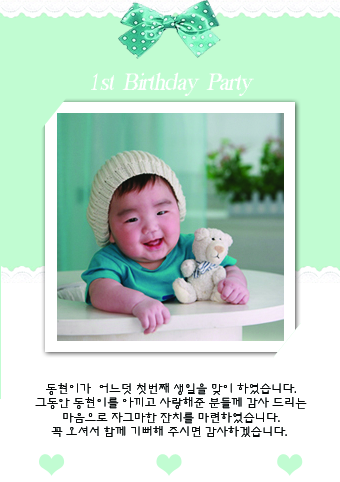
<style>
.page{position:relative;width:340px;height:482px;background:#ffffff}
.page>*{position:absolute;margin:0}
.t1{font:24px "MS Serif";letter-spacing:-0.05em;color:#ffffff;font-style:italic}
.t2{font:12px "HYnamL";letter-spacing:-0.05em;color:#060808}
</style>
<div class="page">
<p class="t1" style="left:91px;top:72px;width:163px;height:24px">1st  Birthday  Party</p>
<p class="t2" style="left:35px;top:383px;width:272px;height:54px;text-align:center">동현이가  어느덧 첫번째 생일을 맞이 하였습니다.<br>그동안 동현이를 아끼고 사랑해준 분들께 감사 드리는<br>마음으로 자그마한 잔치를 마련하였습니다.<br>꼭 오셔서 함께 기뻐해 주시면 감사하겠습니다.</p>
</div>
